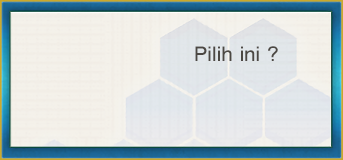
<style>
.page{position:relative;width:343px;height:160px}
.page>*{position:absolute;margin:0}
.t1{font:20px "FutoGoB101Pr5-Bold";color:#4c4843}
</style>
<div class="page">
<p class="t1" style="left:195px;top:46px;width:83px;height:15px">Pilih ini ?</p>
</div>
